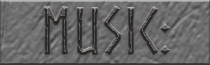
<style>
.page{position:relative;width:210px;height:65px}
.page>*{position:absolute;margin:0}
.t1{font:65px "Norse-Bold"}
</style>
<div class="page">
<p class="t1" style="left:44px;top:5px;width:126px;height:51px">Music:</p>
</div>
